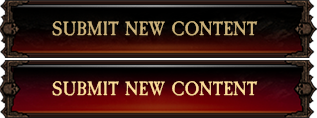
<style>
.page{position:relative;width:317px;height:118px}
.page>*{position:absolute;margin:0}
.t1{font:20.1px "CaslonAntique";color:#ccb27a}
.t2{font:20.1px "CaslonAntique";color:#ffdf9a}
</style>
<div class="page">
<p class="t1" style="left:52px;top:21px;width:206px;height:15px">SUBMIT NEW CONTENT</p>
<p class="t2" style="left:52px;top:81px;width:206px;height:15px">SUBMIT NEW CONTENT</p>
</div>
